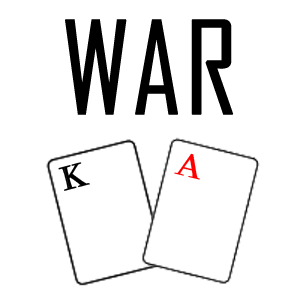
<style>
.page{position:relative;width:300px;height:300px;background:#ffffff}
.page>*{position:absolute;margin:0}
.t1{font:123px "AgencyFB-Reg";color:#000000;text-transform:uppercase;font-weight:bold}
.t2{font:31.2px "Castellar";color:#ff0000;text-transform:uppercase;font-weight:bold}
.t3{font:31.2px "Castellar";color:#000000;text-transform:uppercase;font-weight:bold}
</style>
<div class="page">
<p class="t1" style="left:65px;top:19px;width:169px;height:96px">WAR</p>
<p class="t2" style="left:174px;top:153px;width:26px;height:27px;rotate:14deg">A</p>
<p class="t3" style="left:58px;top:162px;width:32px;height:29px;rotate:-15deg">K</p>
</div>
